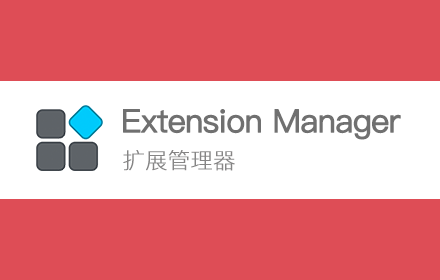
<style>
.page{position:relative;width:440px;height:280px;background:#de4d56}
.page>*{position:absolute;margin:0}
.t1{font:32px "PingFangSC-Regular";letter-spacing:-0.04em;color:#707070;font-weight:bold}
.t2{font:22px "PingFangSC-Thin";color:#868585;font-weight:bold}
</style>
<div class="page">
<p class="t1" style="left:123px;top:109px;width:278px;height:31px">Extension Manager</p>
<p class="t2" style="left:123px;top:150px;width:112px;height:21px">扩展管理器</p>
</div>
